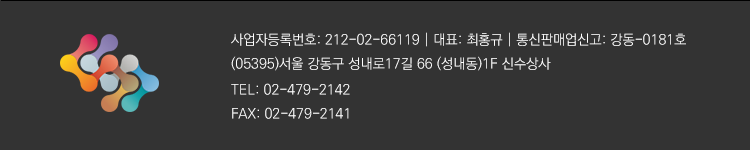
<style>
.page{position:relative;width:750px;height:150px;background:#333333}
.page>*{position:absolute;margin:0}
.t1{font:14px/24px "KoPubDotumLight";color:#ffffff}
</style>
<div class="page">
<p class="t1" style="left:231px;top:32px;width:455px;height:39px">사업자등록번호: 212-02-66119 | 대표: 최홍규 | 통신판매업신고: 강동-0181호<br>(05395)서울 강동구 성내로17길 66 (성내동)1F 신수상사</p>
<p class="t1" style="left:231px;top:83px;width:119px;height:36px">TEL: 02-479-2142<br>FAX: 02-479-2141</p>
</div>
